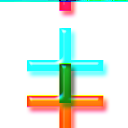
<style>
.page{position:relative;width:128px;height:128px;background:#ffffff}
.page>*{position:absolute;margin:0}
.t1{font:140px "Georgia-Bold"}
</style>
<div class="page">
<p class="t1" style="left:27px;top:26px;width:77px;height:75px">+</p>
</div>
